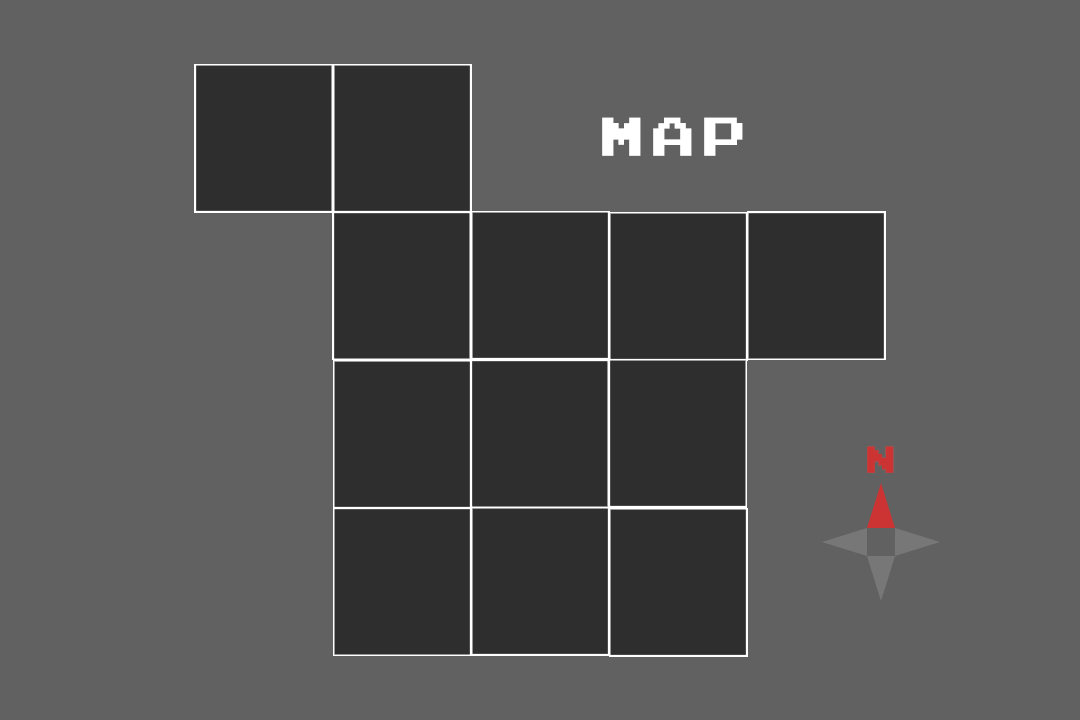
<style>
.page{position:relative;width:1080px;height:720px;background:#616161}
.page>*{position:absolute;margin:0}
.t1{font:76.3px "ArcadeClassic";letter-spacing:0.12em;color:#ffffff}
.t2{font:52.4px "ArcadeClassic";letter-spacing:0.12em;color:#cc3333}
</style>
<div class="page">
<p class="t1" style="left:602px;top:117px;width:141px;height:39px">map</p>
<p class="t2" style="left:867px;top:446px;width:27px;height:27px">n</p>
</div>
